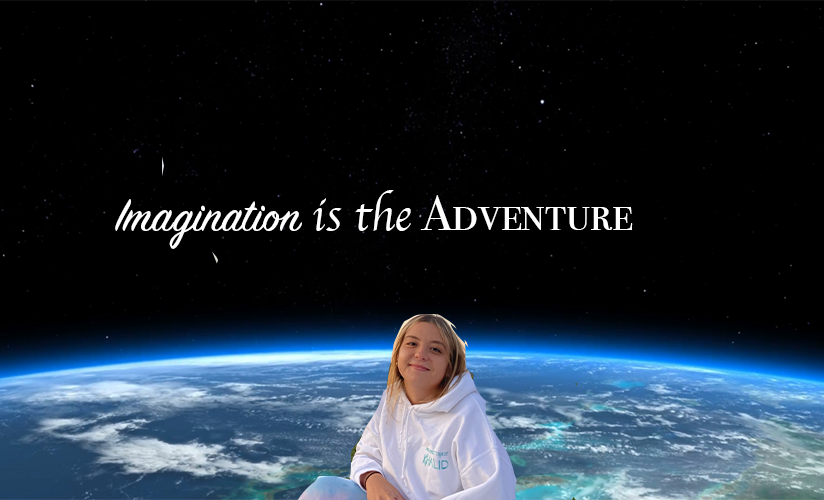
<style>
.page{position:relative;width:824px;height:500px;background:#000000}
.page>*{position:absolute;margin:0}
.t1{font:50px "SignPainter-HouseScript";color:#ffffff}
.t2{font:45.8px "Apple-Chancery";color:#ffffff}
.t3{font:50px "BodoniSvtyTwoSCITCTT-Book";color:#ffffff}
</style>
<div class="page">
<p class="t1" style="left:115px;top:190px;width:518px;height:59px">Imagination <span class="t2">is the </span><span class="t3">Adventure</span></p>
</div>
